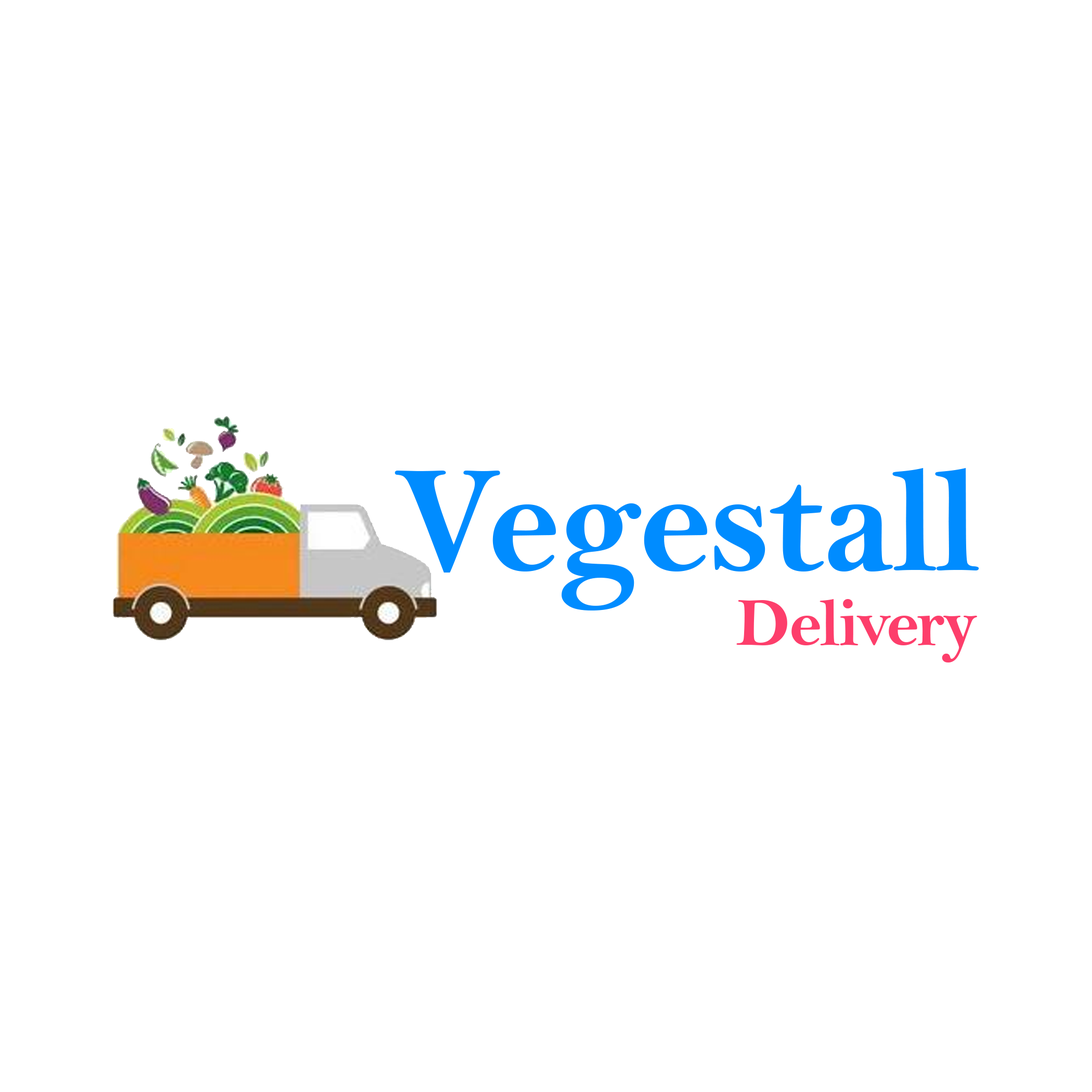
<style>
.page{position:relative;width:1092px;height:1092px;background:#ffffff}
.page>*{position:absolute;margin:0}
.t1{font:152.7px "BellMTBold";letter-spacing:-0.025em;color:#008cff}
.t2{font:68.4px "BellMTBold";letter-spacing:-0.025em;color:#fd3e6b}
</style>
<div class="page">
<p class="t1" style="left:395px;top:468px;width:584px;height:142px">Vegestall</p>
<p class="t2" style="left:736px;top:599px;width:241px;height:63px">Delivery</p>
</div>
